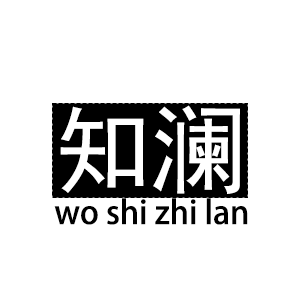
<style>
.page{position:relative;width:300px;height:300px;background:#ffffff}
.page>*{position:absolute;margin:0}
.t1{font:96px "SimHei";color:#ffffff}
.t2{font:32px "AdobeHeitiStd-Regular";color:#000000}
</style>
<div class="page">
<p class="t1" style="left:60px;top:105px;width:180px;height:89px">知澜</p>
<p class="t2" style="left:54px;top:198px;width:194px;height:27px">wo shi zhi lan</p>
</div>
